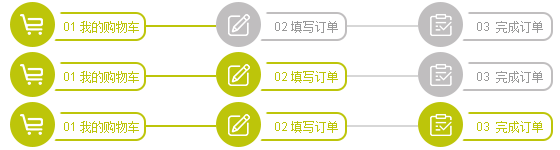
<style>
.page{position:relative;width:560px;height:150px;background:#ffffff}
.page>*{position:absolute;margin:0}
.t1{font:12px "SimSun";color:#bdc50a}
.t2{font:12px "ArialMT";color:#bdc50a}
.t3{font:12px "SimSun";color:#999999}
.t4{font:12px "ArialMT";color:#999999}
</style>
<div class="page">
<p class="t1" style="left:64px;top:21px;width:75px;height:12px"><span class="t2">01 </span>我的购物车</p>
<p class="t3" style="left:275px;top:21px;width:63px;height:12px"><span class="t4">02 </span>填写订单</p>
<p class="t3" style="left:477px;top:21px;width:66px;height:12px"><span class="t4">03</span> 完成订单</p>
<p class="t1" style="left:64px;top:71px;width:75px;height:12px"><span class="t2">01 </span>我的购物车</p>
<p class="t1" style="left:275px;top:71px;width:63px;height:12px"><span class="t2">02 </span>填写订单</p>
<p class="t3" style="left:477px;top:71px;width:66px;height:12px"><span class="t4">03</span> 完成订单</p>
<p class="t1" style="left:64px;top:121px;width:75px;height:12px"><span class="t2">01 </span>我的购物车</p>
<p class="t1" style="left:275px;top:121px;width:63px;height:12px"><span class="t2">02 </span>填写订单</p>
<p class="t1" style="left:477px;top:121px;width:66px;height:12px"><span class="t2">03</span> 完成订单</p>
</div>
